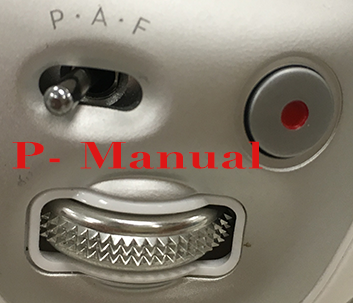
<style>
.page{position:relative;width:353px;height:303px}
.page>*{position:absolute;margin:0}
.t1{font:63px "Didot-Bold";color:#dd1616;scale:1.43 1}
</style>
<div class="page">
<p class="t1" style="left:12px;top:141px;width:251px;height:28px">P- Manual</p>
</div>
